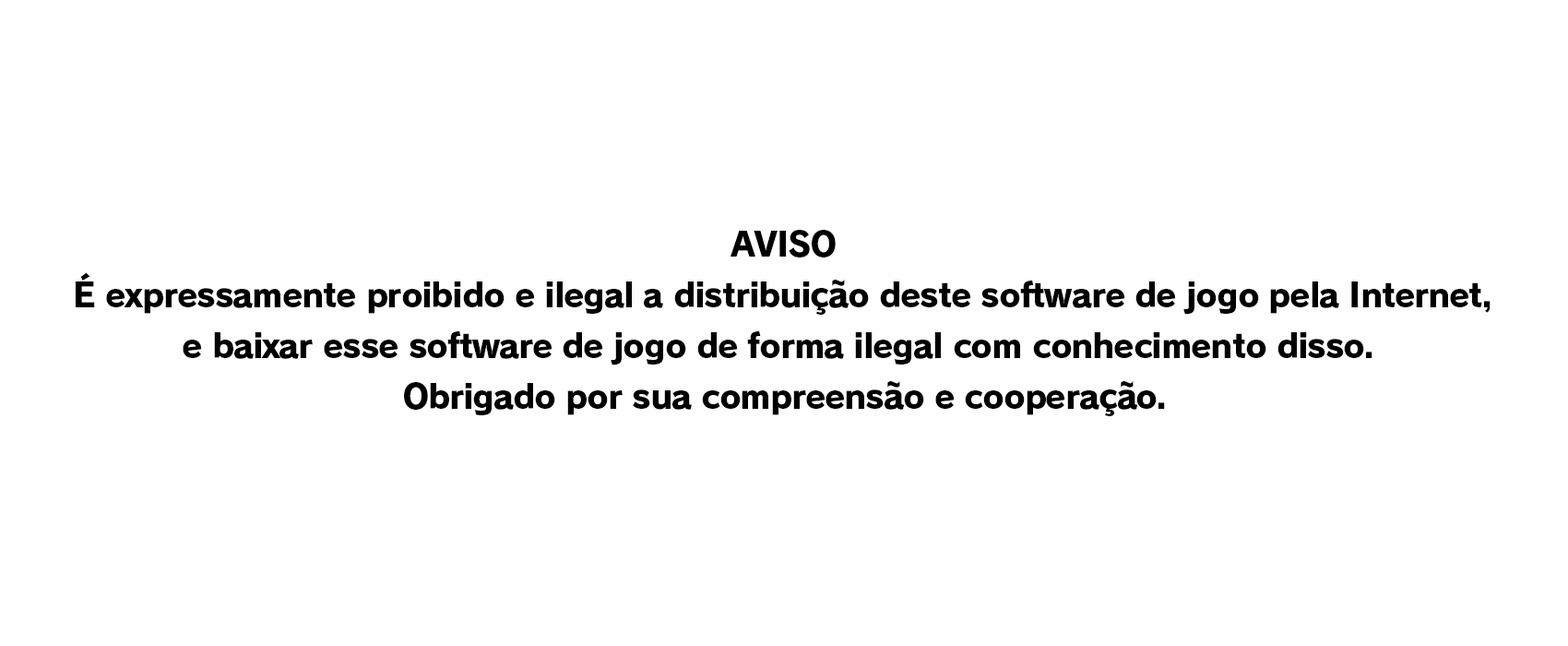
<style>
.page{position:relative;width:1568px;height:646px;background:#fffeff}
.page>*{position:absolute;margin:0}
.t1{font:33.2px "RodinPro-EB";letter-spacing:-0.045em;color:#000000}
.t2{font:33.2px "RodinPro-EB";letter-spacing:-0.032em;color:#000000}
</style>
<div class="page">
<p class="t1" style="left:731px;top:230px;width:105px;height:27px">AVISO</p>
<p class="t2" style="left:76px;top:272px;width:1415px;height:43px">É expressamente proibido e ilegal a distribuição deste software de jogo pela Internet,</p>
<p class="t2" style="left:183px;top:331px;width:1189px;height:34px">e baixar esse software de jogo de forma ilegal com conhecimento disso.</p>
<p class="t2" style="left:404px;top:381px;width:761px;height:35px">Obrigado por sua compreensão e cooperação.</p>
</div>
